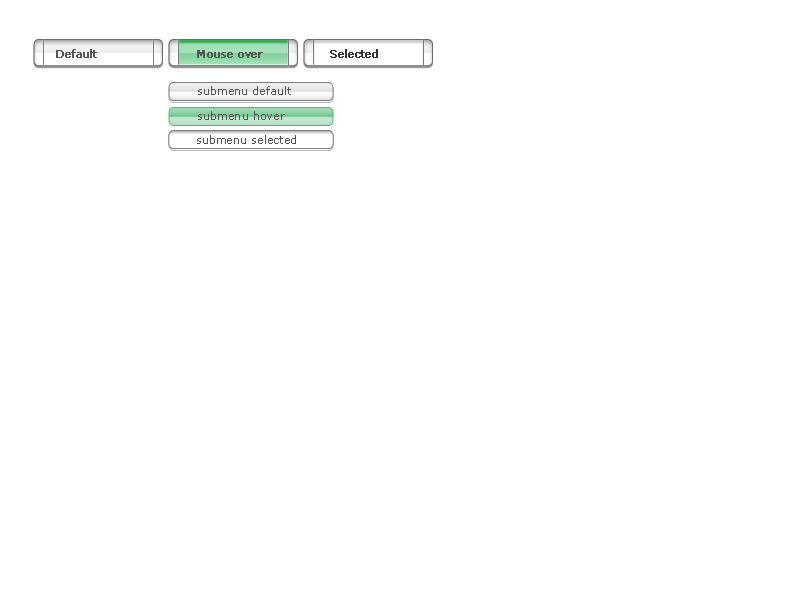
<style>
.page{position:relative;width:800px;height:600px;background:#ffffff}
.page>*{position:absolute;margin:0}
.t1{font:11px "Verdana";color:#555555;font-weight:bold}
.t2{font:11px "Verdana";color:#353535;font-weight:bold}
.t3{font:11px "Verdana";letter-spacing:0.01em;color:#555555}
</style>
<div class="page">
<p class="t1" style="left:56px;top:49px;width:41px;height:9px">Default</p>
<p class="t1" style="left:197px;top:50px;width:66px;height:8px">Mouse over</p>
<p class="t2" style="left:330px;top:49px;width:48px;height:9px">Selected</p>
<p class="t3" style="left:198px;top:86px;width:93px;height:9px">submenu default</p>
<p class="t3" style="left:198px;top:111px;width:87px;height:9px">submenu hover</p>
<p class="t3" style="left:197px;top:135px;width:99px;height:9px">submenu selected</p>
</div>
